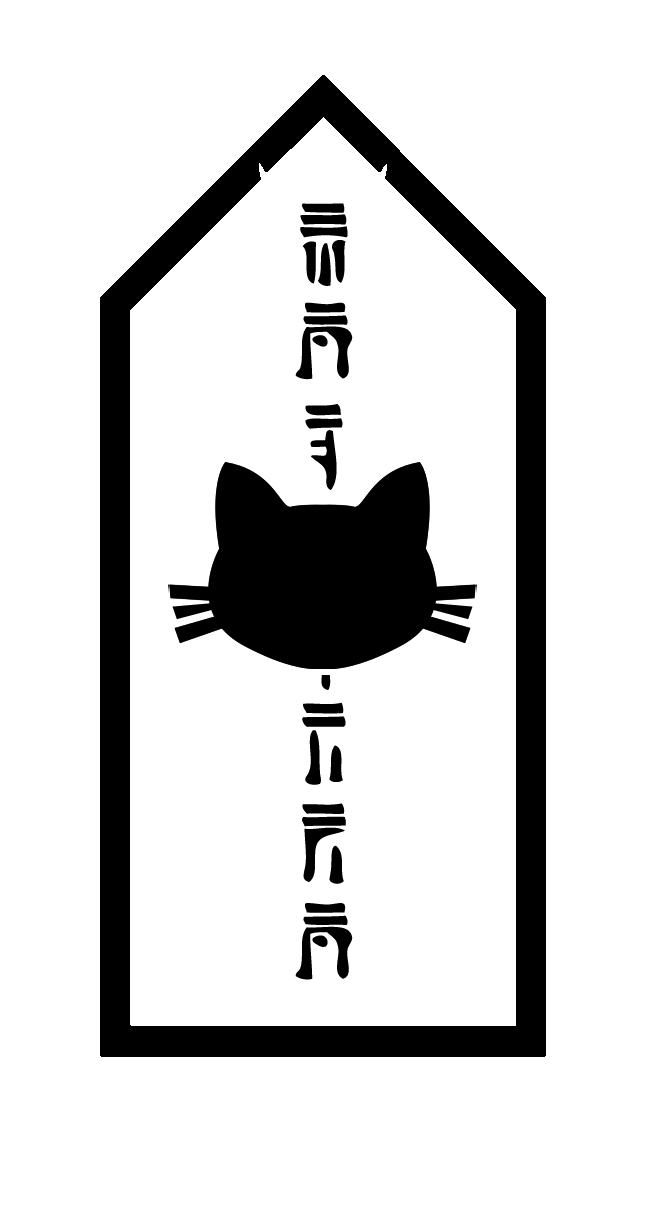
<style>
.page{position:relative;width:646px;height:1220px;background:#ffffff}
.page>*{position:absolute;margin:0}
.t1{font:120.4px/100.1px "AncientHylian-English";color:#000000;scale:1.2 1}
</style>
<div class="page">
<p class="t1" style="left:295px;top:203px;width:58px;height:777px;text-align:center">S<br>A<br>M<br>A<br>N<br>T<br>H<br>A</p>
</div>
